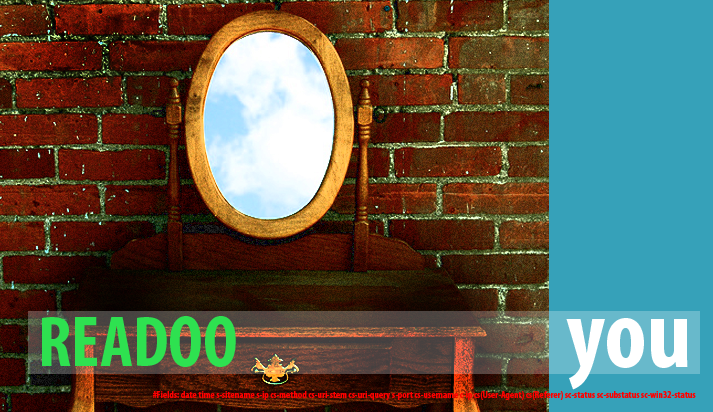
<style>
.page{position:relative;width:713px;height:412px}
.page>*{position:absolute;margin:0}
.t1{font:72px "MyriadPro-BoldCond";color:#2ee150}
.t2{font:100px "MyriadPro-BoldCond";color:#ffffff}
.t3{font:10px "MyriadPro-BoldCond";color:#ff0000}
</style>
<div class="page">
<p class="t1" style="left:42px;top:316px;width:194px;height:51px">READOO</p>
<p class="t2" style="left:566px;top:318px;width:122px;height:72px">you</p>
<p class="t3" style="left:152px;top:391px;width:544px;height:10px">#Fields: date time s-sitename s-ip cs-method cs-uri-stem cs-uri-query s-port cs-username c-ip cs(User-Agent) cs(Referer) sc-status sc-substatus sc-win32-status</p>
</div>
